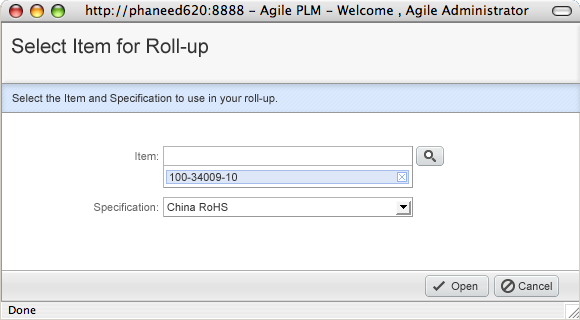
<style>
.page{position:relative;width:580px;height:320px;background:#ffffff}
.page>*{position:absolute;margin:0}
.t1{font:20px "ArialMT";color:#333333}
.t2{font:11px "ArialMT";color:#333333}
.t3{font:11px "ArialMT";color:#666666}
</style>
<div class="page">
<p class="t1" style="left:12px;top:38px;width:196px;height:19px">Select Item for Roll-up</p>
<p class="t2" style="left:12px;top:94px;width:265px;height:11px">Select the Item and Specification to use in your roll-up.</p>
<p class="t3" style="left:135px;top:152px;width:23px;height:8px">Item:</p>
<p class="t2" style="left:170px;top:173px;width:67px;height:8px">100-34009-10</p>
<p class="t3" style="left:94px;top:203px;width:64px;height:11px">Specification:</p>
<p class="t2" style="left:167px;top:203px;width:61px;height:8px">China RoHS</p>
<p class="t2" style="left:451px;top:282px;width:27px;height:11px">Open</p>
<p class="t2" style="left:518px;top:282px;width:34px;height:8px">Cancel</p>
</div>
